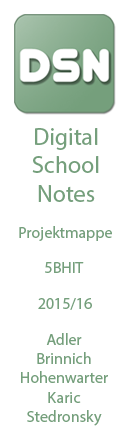
<style>
.page{position:relative;width:130px;height:439px;background:#ffffff}
.page>*{position:absolute;margin:0}
.t1{font:24px "MyriadPro-Regular";color:#759f7c}
.t2{font:16px "MyriadPro-Regular";color:#759f7c}
</style>
<div class="page">
<p class="t1" style="left:32px;top:128px;width:67px;height:74px;text-align:center">Digital<br>School<br>Notes</p>
<p class="t2" style="left:19px;top:226px;width:93px;height:15px">Projektmappe</p>
<p class="t2" style="left:45px;top:262px;width:39px;height:11px">5BHIT</p>
<p class="t2" style="left:38px;top:298px;width:54px;height:12px">2015/16</p>
<p class="t2" style="left:21px;top:333px;width:87px;height:93px;text-align:center">Adler<br>Brinnich<br>Hohenwarter<br>Karic<br>Stedronsky</p>
</div>
